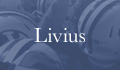
<style>
.page{position:relative;width:120px;height:70px}
.page>*{position:absolute;margin:0}
.t1{font:21.1px "Baskerville";color:#ffffff}
</style>
<div class="page">
<p class="t1" style="left:34px;top:28px;width:51px;height:15px">Livius</p>
</div>
